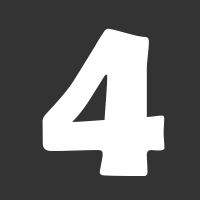
<style>
.page{position:relative;width:200px;height:200px;background:#333333}
.page>*{position:absolute;margin:0}
.t1{font:56.8px/808.2px "BerlinSansFBDemi-Bold";color:#ffffff}
</style>
<div class="page">
<p class="t1" style="left:42px;top:28px;width:123px;height:148px;text-align:center">4</p>
</div>
